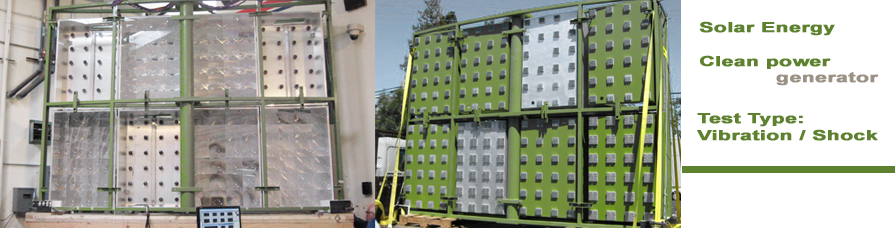
<style>
.page{position:relative;width:895px;height:228px;background:#ffffff}
.page>*{position:absolute;margin:0}
.t1{font:14px "Arial-BoldMT";color:#5d812f;font-weight:bold;scale:1.5 1}
.t2{font:14px "Arial-BoldMT";color:#9b9184;font-weight:bold;scale:1.5 1}
</style>
<div class="page">
<p class="t1" style="left:699px;top:21px;width:180px;height:65px">Solar Energy<br><br>Clean power<br>            <span class="t2">generator</span></p>
<p class="t1" style="left:697px;top:113px;width:181px;height:28px">Test Type:<br>Vibration / Shock</p>
</div>
